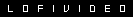
<style>
.page{position:relative;width:133px;height:17px;background:#000000}
.page>*{position:absolute;margin:0}
.t1{font:8px "SWFTv01";color:#ffffff}
</style>
<div class="page">
<p class="t1" style="left:8px;top:5px;width:117px;height:7px">L O F I V I D E O</p>
</div>
